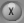
<style>
.page{position:relative;width:24px;height:23px}
.page>*{position:absolute;margin:0}
.t1{font:10px "Helvetica-Condensed-Bold";letter-spacing:-0.01em;color:#2f2f2f}
</style>
<div class="page">
<p class="t1" style="left:8px;top:7px;width:6px;height:8px">X</p>
</div>
